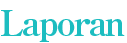
<style>
.page{position:relative;width:127px;height:43px;background:#ffffff}
.page>*{position:absolute;margin:0}
.t1{font:35px "RyuminPro-ExBold";letter-spacing:-0.08em;color:#1cbdc0}
</style>
<div class="page">
<p class="t1" style="left:1px;top:10px;width:124px;height:32px">Laporan</p>
</div>
